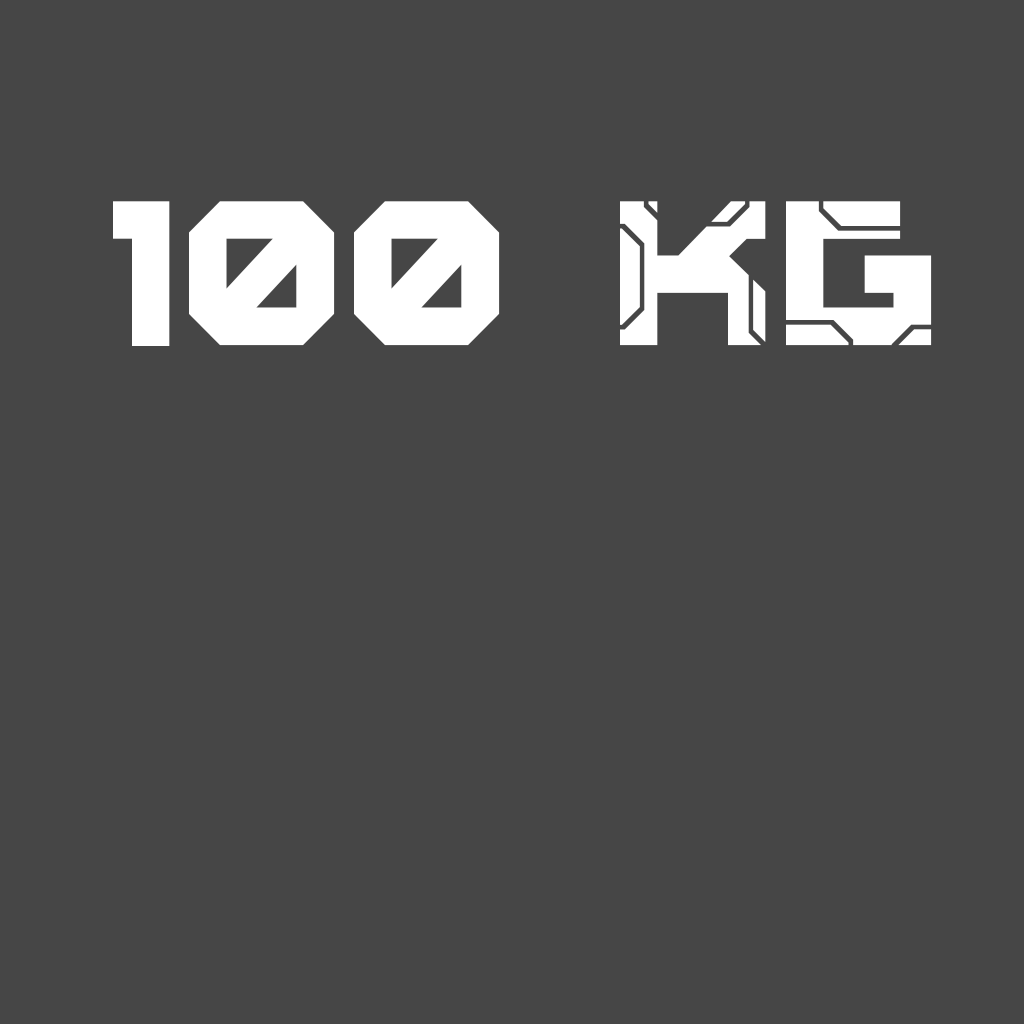
<style>
.page{position:relative;width:1024px;height:1024px;background:#464646}
.page>*{position:absolute;margin:0}
.t1{font:200px "valorax";color:#ffffff}
</style>
<div class="page">
<p class="t1" style="left:113px;top:201px;width:819px;height:145px">100 KG</p>
</div>
